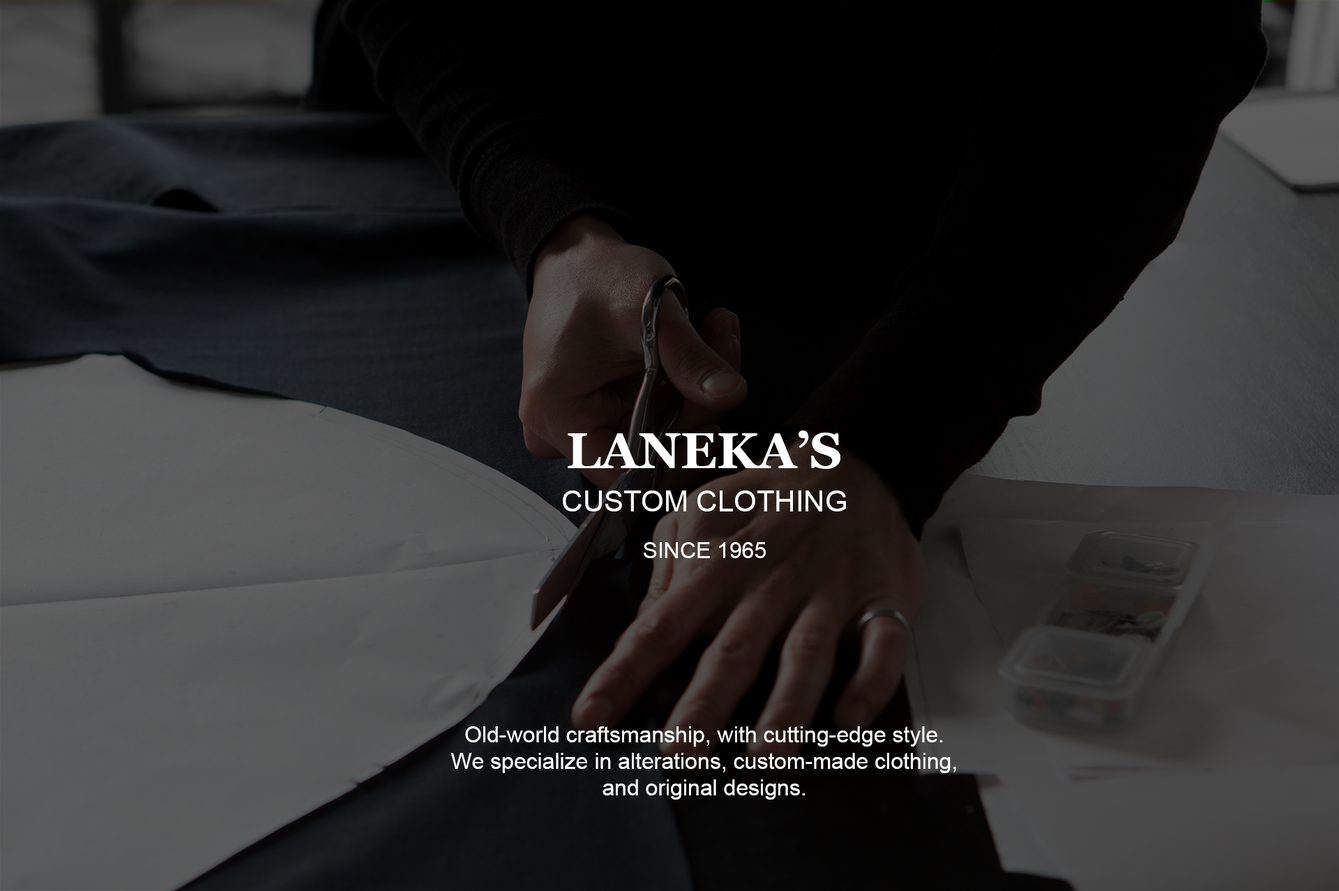
<style>
.page{position:relative;width:1339px;height:891px}
.page>*{position:absolute;margin:0}
.t1{font:50.2px "Georgia-Bold";color:#ffffff}
.t2{font:29.3px "ArialMT";color:#ffffff}
.t3{font:22.3px "ArialMT";color:#ffffff}
</style>
<div class="page">
<p class="t1" style="left:568px;top:430px;width:272px;height:39px">LANEKA’S</p>
<p class="t2" style="left:563px;top:490px;width:283px;height:68px;text-align:center">CUSTOM CLOTHING<br><br><span class="t3">SINCE 1965</span></p>
<p class="t3" style="left:451px;top:726px;width:505px;height:73px;text-align:center">Old-world craftsmanship, with cutting-edge style. We specialize in alterations, custom-made clothing, and original designs.</p>
</div>
